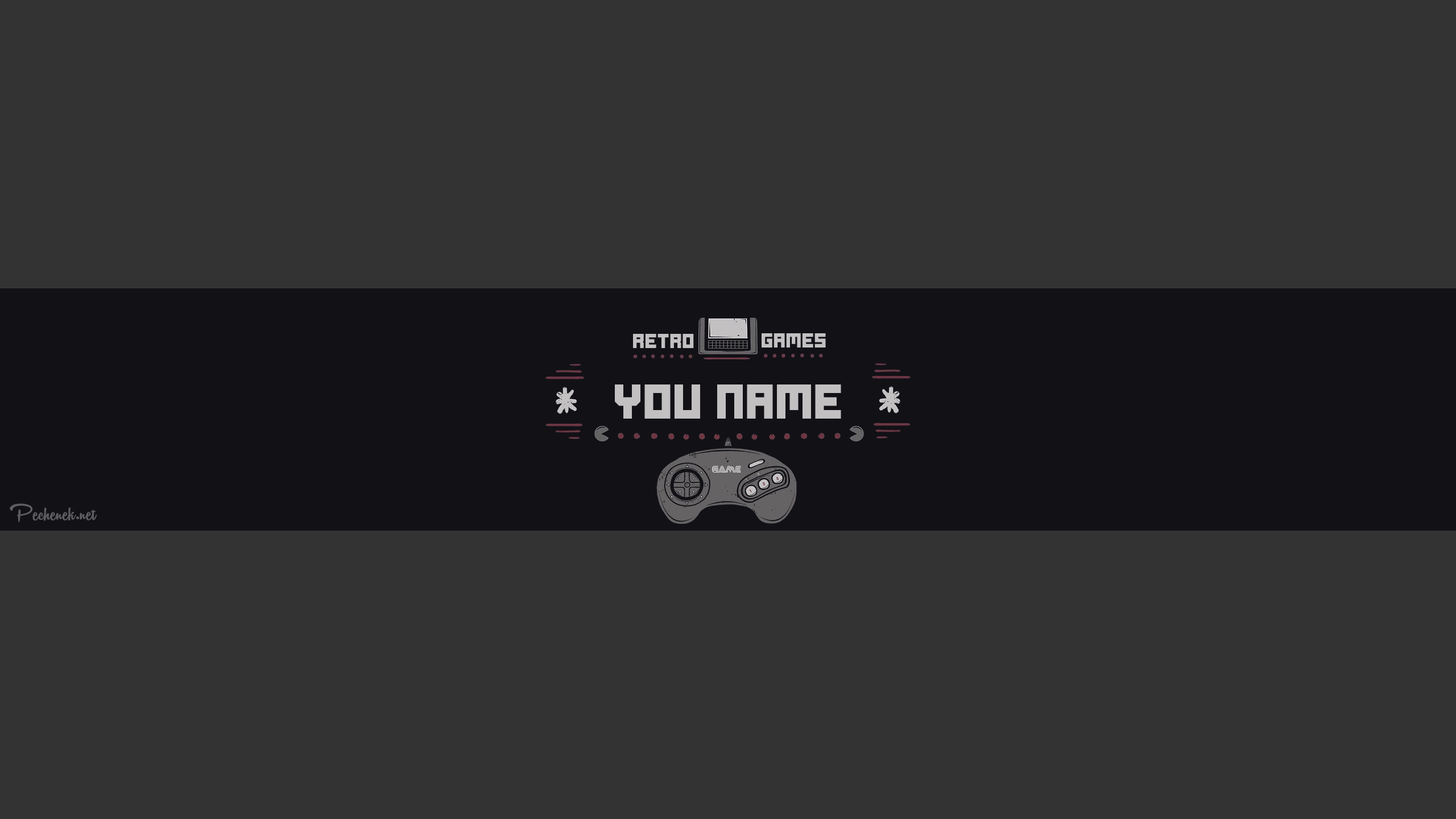
<style>
.page{position:relative;width:1456px;height:819px;background:#333333}
.page>*{position:absolute;margin:0}
.t1{font:14.2px "Ode-to-Idle-Gaming";color:#c2c0c1}
.t2{font:34.1px "Ode-to-Idle-Gaming";color:#c2c0c1}
.t3{font:26.1px "Vantom";color:#5e5e61}
</style>
<div class="page">
<p class="t1" style="left:633px;top:334px;width:61px;height:14px">RETRO</p>
<p class="t1" style="left:762px;top:333px;width:64px;height:15px">GAMES</p>
<p class="t2" style="left:614px;top:384px;width:227px;height:35px">YOU NAME</p>
<p class="t3" style="left:9px;top:503px;width:88px;height:20px">Pechenek.net</p>
</div>
